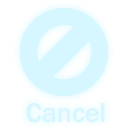
<style>
.page{position:relative;width:128px;height:128px;background:#ffffff}
.page>*{position:absolute;margin:0}
.t1{font:28px "FranklinGothic-Medium";color:#d6f7ff}
</style>
<div class="page">
<p class="t1" style="left:26px;top:103px;width:79px;height:20px">Cancel</p>
<p class="t1" style="left:26px;top:103px;width:79px;height:20px">Cancel</p>
</div>
